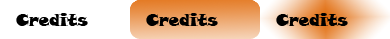
<style>
.page{position:relative;width:390px;height:39px;background:#ffffff}
.page>*{position:absolute;margin:0}
.t1{font:16.7px "SnapITC-Regular";color:#000000}
</style>
<div class="page">
<p class="t1" style="left:16px;top:13px;width:72px;height:13px">Credits</p>
<p class="t1" style="left:146px;top:13px;width:72px;height:13px">Credits</p>
<p class="t1" style="left:276px;top:13px;width:72px;height:13px">Credits</p>
</div>
